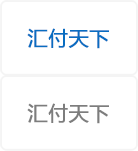
<style>
.page{position:relative;width:138px;height:151px;background:#ffffff}
.page>*{position:absolute;margin:0}
.t1{font:20px "MicrosoftYaHei";color:#096dc1;font-weight:bold}
.t2{font:20px "MicrosoftYaHei";color:#7d7d7d;font-weight:bold}
</style>
<div class="page">
<p class="t1" style="left:27px;top:28px;width:82px;height:21px">汇付天下</p>
<p class="t2" style="left:27px;top:103px;width:82px;height:21px">汇付天下</p>
</div>
